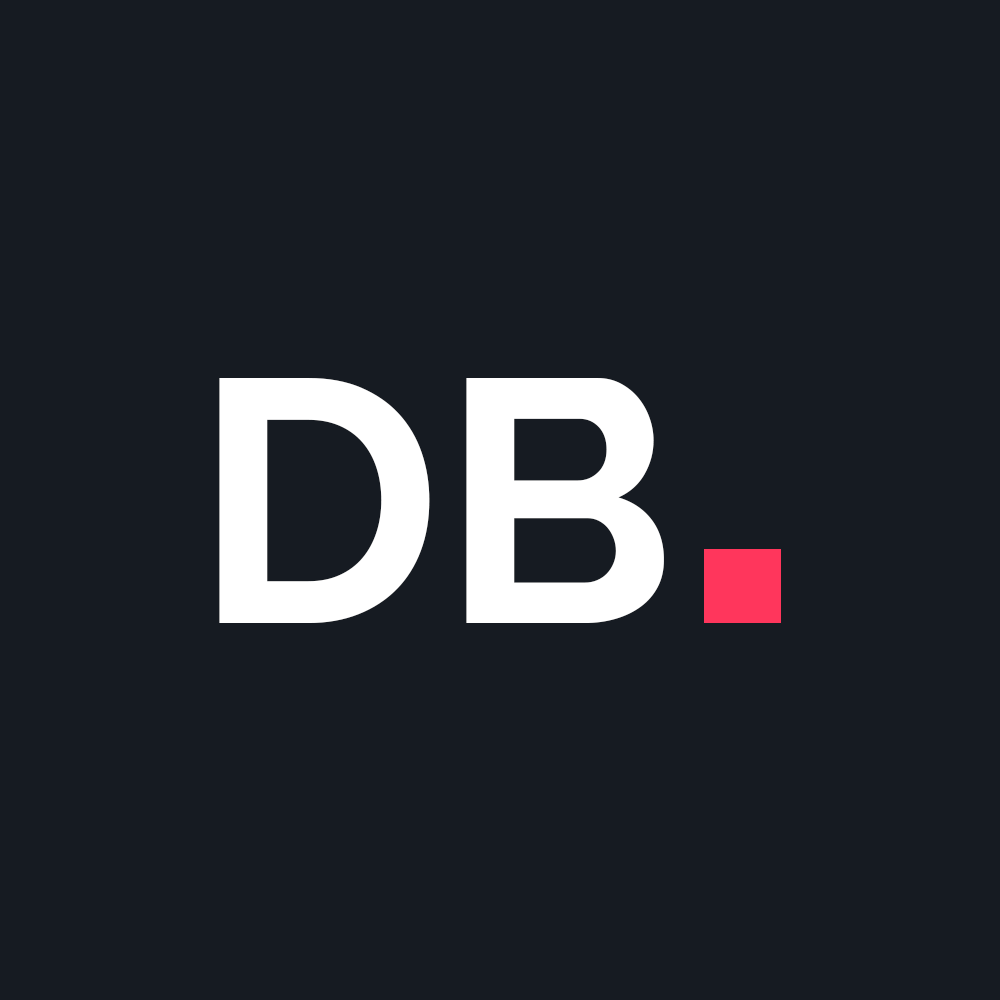
<style>
.page{position:relative;width:1000px;height:1000px;background:#161b22}
.page>*{position:absolute;margin:0}
.t1{font:345.4px "Raleway-Bold";color:#ffffff}
</style>
<div class="page">
<p class="t1" style="left:219px;top:378px;width:445px;height:245px">DB</p>
</div>
